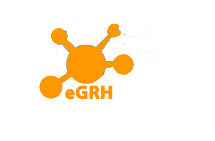
<style>
.page{position:relative;width:215px;height:141px;background:#ffffff}
.page>*{position:absolute;margin:0}
.t1{font:18.7px "MyriadPro-Bold";color:#ff9800;font-weight:bold}
</style>
<div class="page">
<p class="t1" style="left:65px;top:85px;width:48px;height:15px">eGRH</p>
</div>
